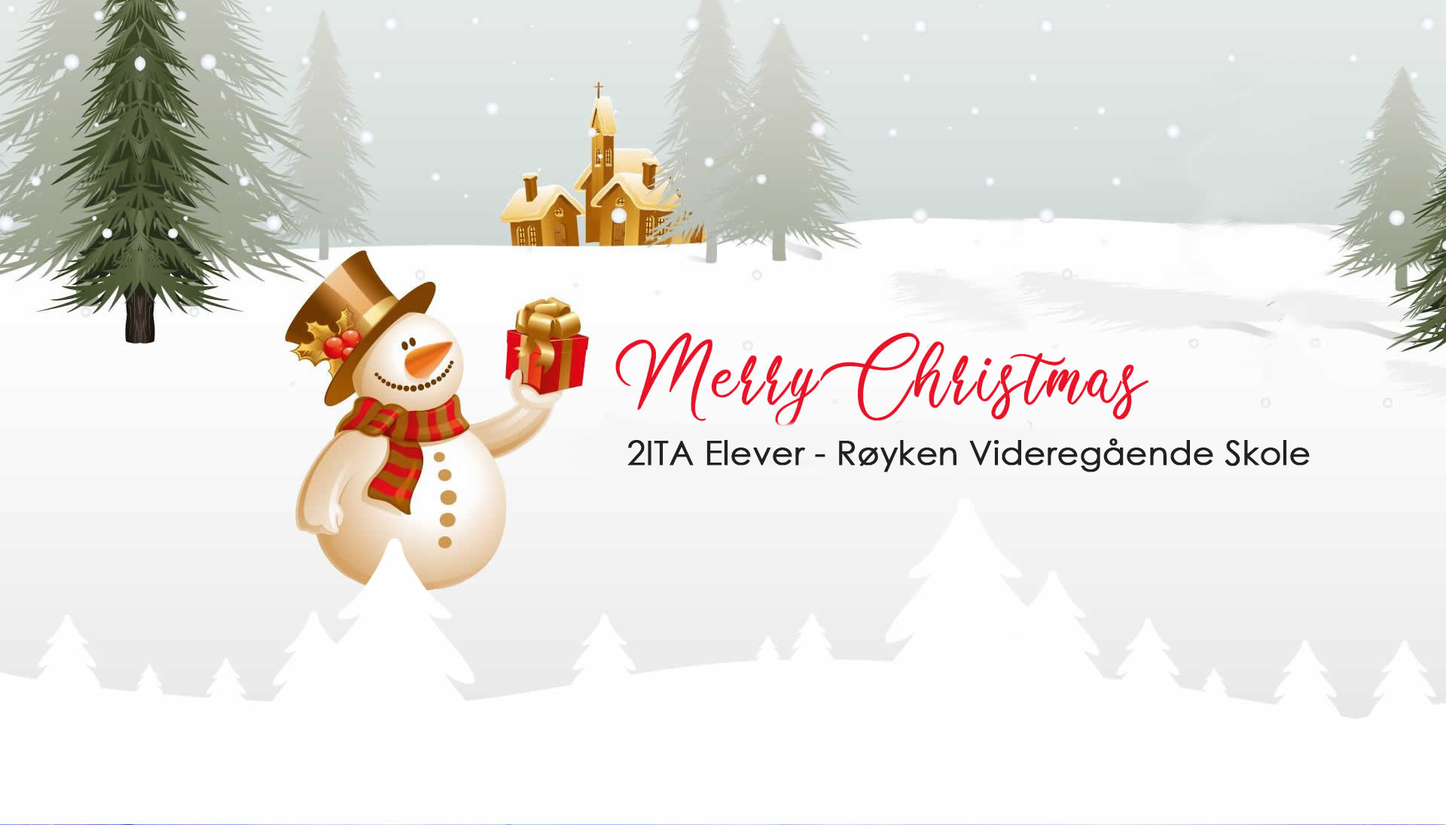
<style>
.page{position:relative;width:1446px;height:825px;background:#fefefe}
.page>*{position:absolute;margin:0}
.t1{font:32.9px "CenturyGothic";color:#212121;font-weight:bold}
</style>
<div class="page">
<p class="t1" style="left:627px;top:438px;width:683px;height:34px">2ITA Elever - Røyken Videregående Skole</p>
</div>
